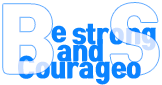
<style>
.page{position:relative;width:162px;height:85px;background:#ffffff}
.page>*{position:absolute;margin:0}
.t1{font:80px "TmonMonsoriOTFBlack";color:#ffffff}
.t2{font:26px "TmonMonsoriOTFBlack";color:#0a83ff}
</style>
<div class="page">
<p class="t1" style="left:3px;top:4px;width:50px;height:70px;opacity:0.7">B</p>
<p class="t2" style="left:51px;top:25px;width:16px;height:18px">e</p>
<p class="t2" style="left:72px;top:23px;width:84px;height:28px">strong</p>
<p class="t2" style="left:57px;top:39px;width:46px;height:23px">and</p>
<p class="t2" style="left:18px;top:55px;width:123px;height:30px">Courageo</p>
</div>
